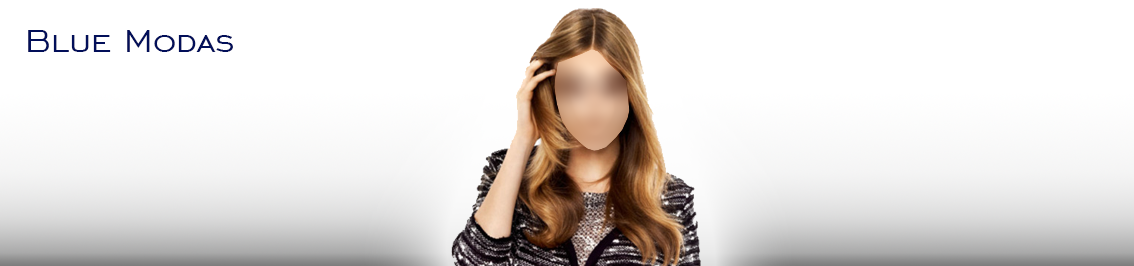
<style>
.page{position:relative;width:1134px;height:266px;background:#ffffff}
.page>*{position:absolute;margin:0}
.t1{font:40px "EngraversGothicBT-Regular";color:#020f59}
</style>
<div class="page">
<p class="t1" style="left:28px;top:30px;width:205px;height:22px">Blue Modas</p>
</div>
